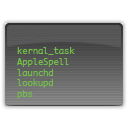
<style>
.page{position:relative;width:128px;height:128px;background:#ffffff}
.page>*{position:absolute;margin:0}
.t1{font:9px "Monaco";letter-spacing:-0.02em;color:#73be4b}
</style>
<div class="page">
<p class="t1" style="left:17px;top:47px;width:58px;height:52px">kernal_task<br>AppleSpell<br>launchd<br>lookupd<br>pbs</p>
</div>
